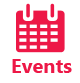
<style>
.page{position:relative;width:80px;height:83px;background:#ffffff}
.page>*{position:absolute;margin:0}
.t1{font:20px "SegoeUI-Bold";color:#ed1847}
</style>
<div class="page">
<p class="t1" style="left:12px;top:59px;width:60px;height:14px">Events</p>
</div>
